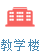
<style>
.page{position:relative;width:40px;height:55px;background:#ffffff}
.page>*{position:absolute;margin:0}
.t1{font:22.5px "SimSun";letter-spacing:0.05em;color:#4788b2;font-variant:small-caps}
</style>
<div class="page">
<p class="t1" style="left:1px;top:39px;width:38px;height:12px">教学楼</p>
</div>
